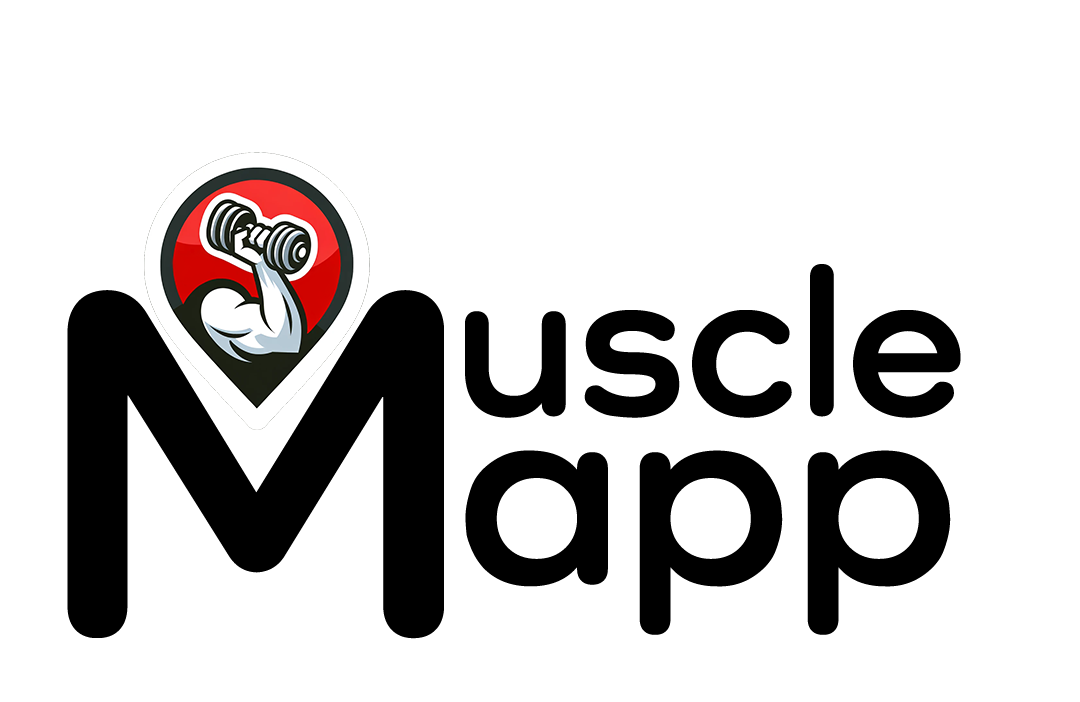
<style>
.page{position:relative;width:1080px;height:702px;background:#ffffff}
.page>*{position:absolute;margin:0}
.t1{font:213.8px "Como-Bold";color:#000000}
.t2{font:509.9px "Como-Bold";color:#000000}
.t3{font:269.6px "Como-Bold";color:#000000;scale:1.03 1}
</style>
<div class="page">
<p class="t1" style="left:465px;top:264px;width:496px;height:154px">uscle</p>
<p class="t2" style="left:67px;top:290px;width:377px;height:349px">M</p>
<p class="t3" style="left:465px;top:450px;width:486px;height:185px">app</p>
</div>
